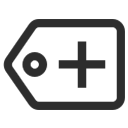
<style>
.page{position:relative;width:128px;height:128px;background:#ffffff}
.page>*{position:absolute;margin:0}
.t1{font:97.2px "ArialMT";color:#2d2d2d}
</style>
<div class="page">
<p class="t1" style="left:58px;top:41px;width:48px;height:47px">+</p>
</div>
